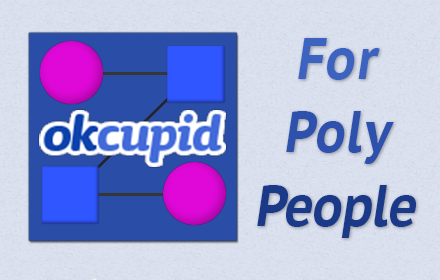
<style>
.page{position:relative;width:440px;height:280px}
.page>*{position:absolute;margin:0}
.t1{font:100.3px/73.6px "PTSans-CaptionBold";color:#1a3988;font-style:italic;scale:0.85 1}
.t2{font:100.3px/73.6px "PTSans-CaptionBold";color:#3d63c1;font-style:italic;scale:0.85 1}
.t3{font:100.3px/73.6px "PTSans-CaptionBold";color:#2d51ac;font-style:italic;scale:0.85 1}
</style>
<div class="page">
<p class="t1" style="left:257px;top:38px;width:159px;height:200px;text-align:center"><span class="t2">For<br></span><span class="t3">Poly<br></span>People</p>
</div>
